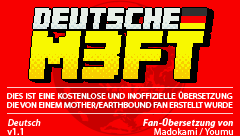
<style>
.page{position:relative;width:240px;height:136px;background:#f80000}
.page>*{position:absolute;margin:0}
.t1{font:8.9px/9.4px "MyriadPro-Regular";letter-spacing:-0.01em;color:#ffffff}
.t2{font:9.4px "MyriadPro-Regular";letter-spacing:0.02em;color:#ffffff}
</style>
<div class="page">
<p class="t1" style="left:7px;top:91px;width:226px;height:18px;text-align:justify">DIES IST EINE KOSTENLOSE UND INOFFIZIELLE ÜBERSETZUNG<br>DIE VON EINEM MOTHER/EARTHBOUND FAN ERSTELLT WURDE</p>
<p class="t2" style="left:7px;top:128px;width:16px;height:7px">v1.1</p>
</div>
